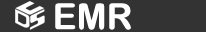
<style>
.page{position:relative;width:206px;height:32px;background:#333333}
.page>*{position:absolute;margin:0}
.t1{font:36px "ArialRoundedMTBold";color:#ffffff}
</style>
<div class="page">
<p class="t1" style="left:55px;top:3px;width:76px;height:27px">EMR</p>
</div>
